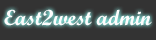
<style>
.page{position:relative;width:156px;height:40px;background:#333333}
.page>*{position:absolute;margin:0}
.t1{font:22px "ScriptMTBold";color:#fdfcfc}
</style>
<div class="page">
<p class="t1" style="left:4px;top:9px;width:148px;height:17px">East2west admin</p>
</div>
